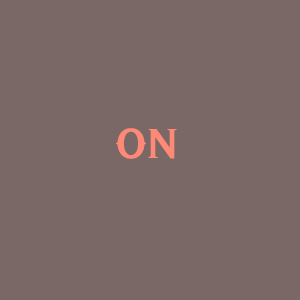
<style>
.page{position:relative;width:300px;height:300px;background:#7a6866}
.page>*{position:absolute;margin:0}
.t1{font:37.9px "WarhavenB";color:#ff8977}
</style>
<div class="page">
<p class="t1" style="left:116px;top:128px;width:61px;height:31px">ON</p>
</div>
